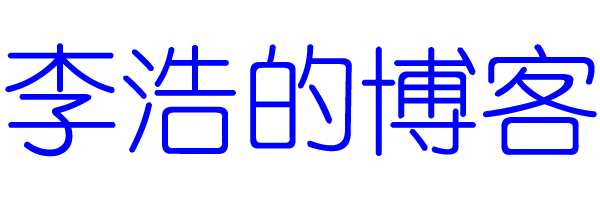
<style>
.page{position:relative;width:600px;height:200px;background:#ffffff}
.page>*{position:absolute;margin:0}
.t1{font:120px "YouYuan";color:#0000ff}
</style>
<div class="page">
<p class="t1" style="left:5px;top:43px;width:592px;height:114px">李浩的博客</p>
</div>
